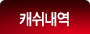
<style>
.page{position:relative;width:90px;height:34px}
.page>*{position:absolute;margin:0}
.t1{font:16px "YDIYGO330";letter-spacing:-0.05em;color:#ffffff;scale:0.9 1}
</style>
<div class="page">
<p class="t1" style="left:19px;top:12px;width:50px;height:15px">캐쉬내역</p>
</div>
